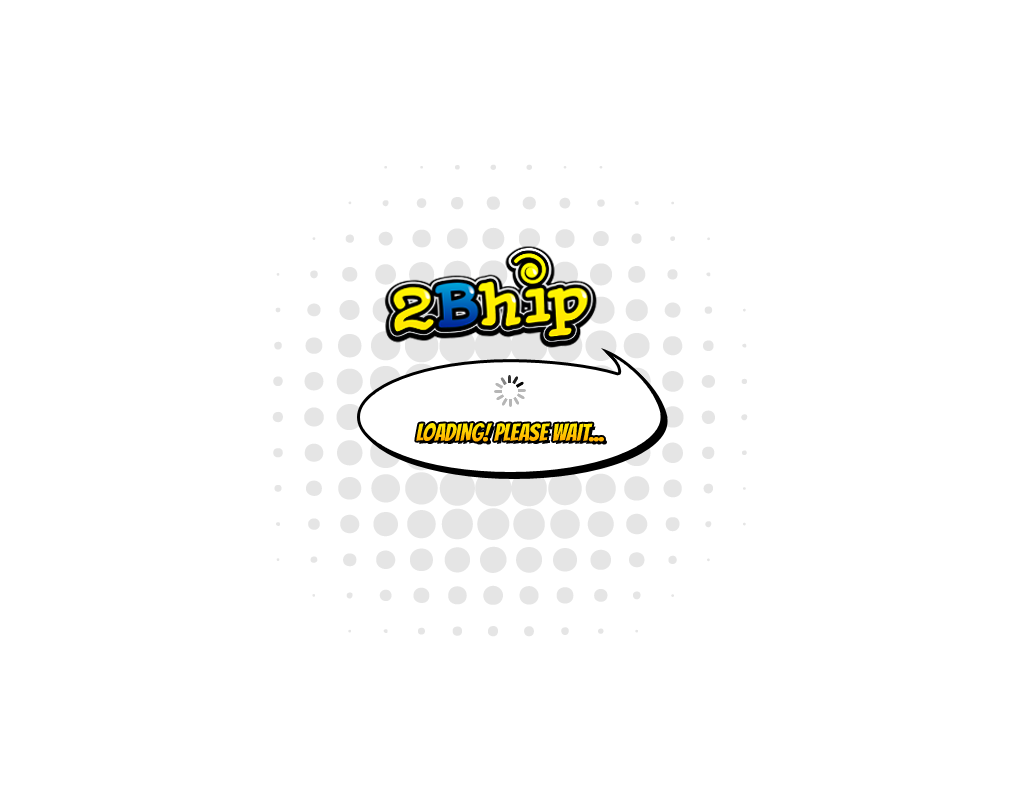
<style>
.page{position:relative;width:1020px;height:800px;background:#ffffff}
.page>*{position:absolute;margin:0}
.t1{font:24px "Bangers-Regular";color:#ffcc00}
</style>
<div class="page">
<p class="t1" style="left:416px;top:423px;width:188px;height:19px">LOADING! Please wait...</p>
</div>
